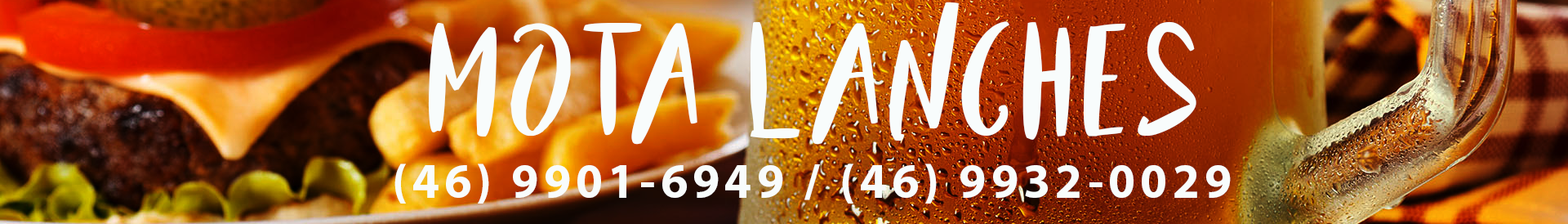
<style>
.page{position:relative;width:1568px;height:224px}
.page>*{position:absolute;margin:0}
.t1{font:114.3px "BeautyandtheBeast";letter-spacing:0.1em;color:#f8fcfc}
.t2{font:49px "MyriadPro-Bold";letter-spacing:0.1em;color:#f8fcfc}
</style>
<div class="page">
<p class="t1" style="left:428px;top:2px;width:768px;height:143px">Mota Lanches</p>
<p class="t2" style="left:394px;top:163px;width:837px;height:40px">(46) 9901-6949 / (46) 9932-0029</p>
</div>
